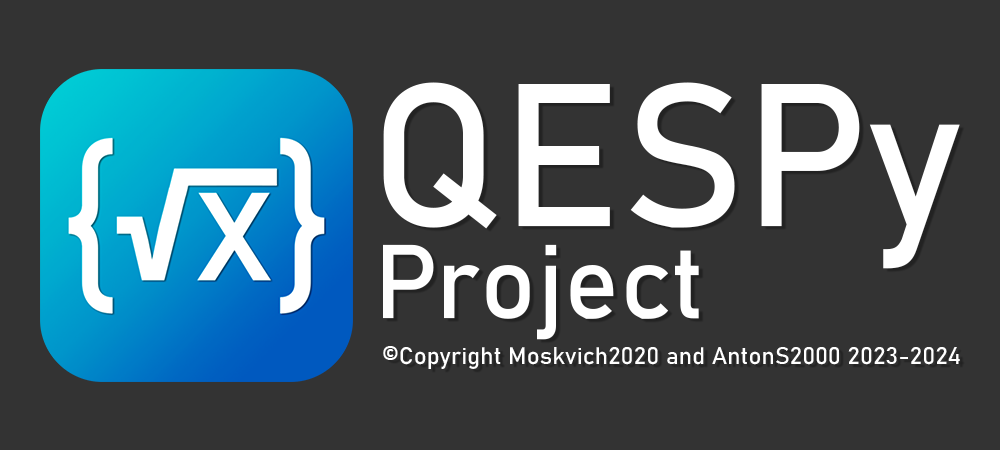
<style>
.page{position:relative;width:1000px;height:450px;background:#333333}
.page>*{position:absolute;margin:0}
.t1{font:200.2px "Bahnschrift";letter-spacing:0.005em;color:#ffffff}
.t2{font:102.6px "Bahnschrift";letter-spacing:0.005em;color:#ffffff}
.t3{font:23.8px "Bahnschrift";letter-spacing:0.005em;color:#ffffff}
</style>
<div class="page">
<p class="t1" style="left:383px;top:82px;width:577px;height:187px">QESPy</p>
<p class="t2" style="left:383px;top:244px;width:316px;height:96px">Project</p>
<p class="t3" style="left:383px;top:346px;width:577px;height:23px">©Copyright Moskvich2020 and AntonS2000 2023-2024</p>
</div>
